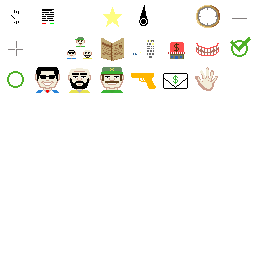
<style>
.page{position:relative;width:256px;height:256px;background:#ffffff}
.page>*{position:absolute;margin:0}
.t1{font:19.2px "MyriadPro-Regular";color:#ffffff;font-weight:bold}
</style>
<div class="page">
<p class="t1" style="left:11px;top:9px;width:9px;height:17px">$</p>
</div>
